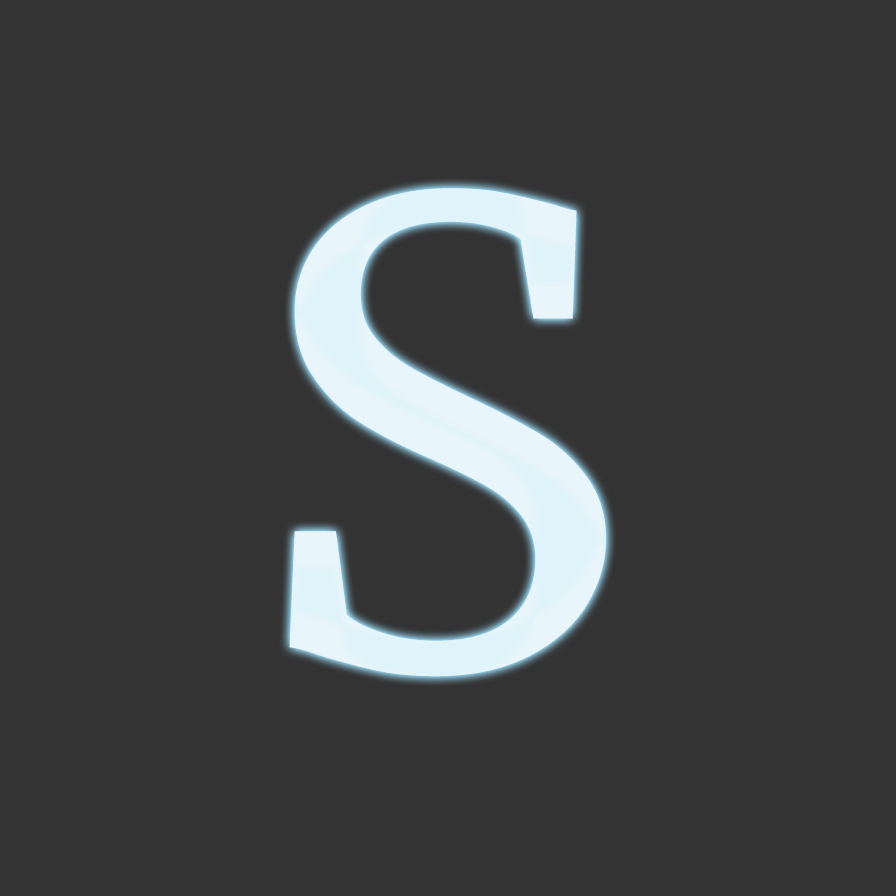
<style>
.page{position:relative;width:896px;height:896px;background:#333333}
.page>*{position:absolute;margin:0}
.t1{font:640px "Merriweather-Regular";color:#e5f5fb}
</style>
<div class="page">
<p class="t1" style="left:289px;top:188px;width:317px;height:489px">S</p>
</div>
